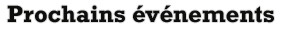
<style>
.page{position:relative;width:300px;height:31px;background:#ffffff}
.page>*{position:absolute;margin:0}
.t1{font:24px "Rockwell-Bold";color:#0e0f0d}
</style>
<div class="page">
<p class="t1" style="left:7px;top:5px;width:267px;height:18px">Prochains événements</p>
</div>
